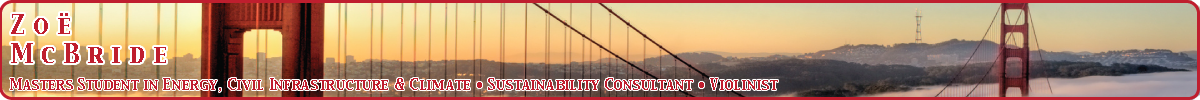
<style>
.page{position:relative;width:1200px;height:100px}
.page>*{position:absolute;margin:0}
.t1{font:24px "CapitalsRegular";color:#bf1e2e}
.t2{font:14px "CapitalsRegular";color:#bf1e2e}
</style>
<div class="page">
<p class="t1" style="left:11px;top:13px;width:155px;height:50px">Z o ë  <br>M c B r i d e</p>
<p class="t2" style="left:10px;top:78px;width:768px;height:14px">Masters Student in Energy, Civil Infrastructure &amp; Climate • Sustainability Consultant • Violinist</p>
</div>
